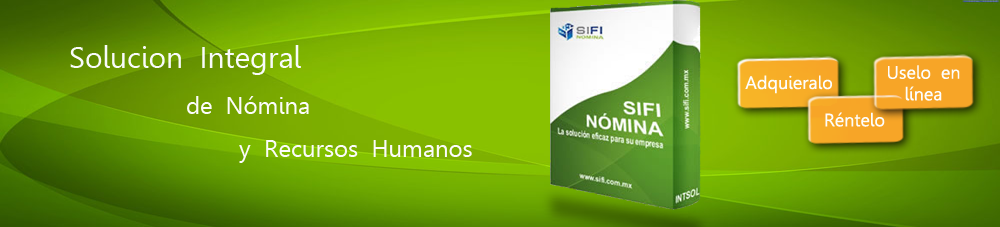
<style>
.page{position:relative;width:1000px;height:227px}
.page>*{position:absolute;margin:0}
.t1{font:30px "Leelawadee";color:#f9fbfb}
.t2{font:18px "Leelawadee";color:#fdfdfc}
.t3{font:24px "Leelawadee";color:#fcfcfc}
.t4{font:24px "Leelawadee";color:#fbfbfb}
</style>
<div class="page">
<p class="t1" style="left:70px;top:45px;width:231px;height:30px">Solucion Integral</p>
<p class="t2" style="left:888px;top:65px;width:72px;height:36px;text-align:center">Uselo en<br>línea</p>
<p class="t2" style="left:745px;top:75px;width:87px;height:19px">Adquieralo</p>
<p class="t3" style="left:187px;top:96px;width:122px;height:18px">de Nómina</p>
<p class="t2" style="left:825px;top:112px;width:60px;height:15px">Réntelo</p>
<p class="t4" style="left:239px;top:140px;width:233px;height:23px">y Recursos Humanos</p>
</div>
